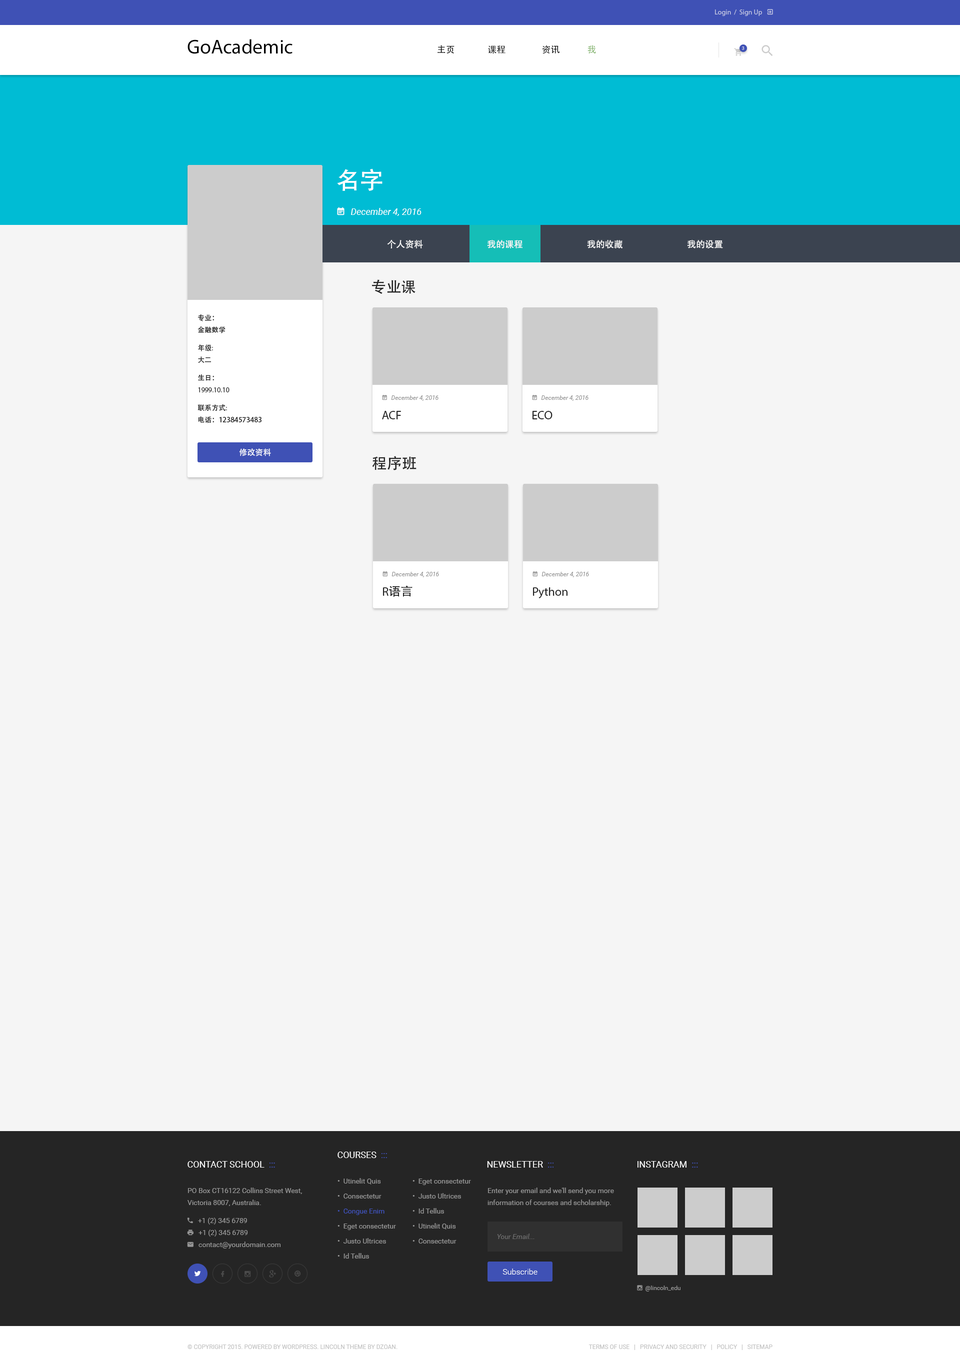
<style>
.page{position:relative;width:960px;height:1366px;background:#f5f5f5}
.page>*{position:absolute;margin:0}
.t1{font:20px "MyriadPro-Regular";color:#000000}
.t2{font:9px "AdobeHeitiStd-Regular";color:#000000}
.t3{font:9px "AdobeHeitiStd-Regular";color:#87b672}
.t4{font:4.5px "Roboto-Regular";text-transform:uppercase}
.t5{font:24px "AdobeHeitiStd-Regular";color:#ffffff}
.t6{font:9px "AdobeHeitiStd-Regular";color:#f5f5f5}
.t7{font:15px "AdobeHeitiStd-Regular";color:#252525}
.t8{font:7px/12px "AdobeHeitiStd-Regular";color:#252525}
.t9{font:7px/18px "AdobeHeitiStd-Regular";color:#252525}
.t10{font:7px/18px "MyriadPro-Regular";color:#252525}
.t11{font:7px/12px "MyriadPro-Regular";color:#252525}
.t12{font:12px "MyriadPro-Regular";color:#252525}
.t13{font:8px "AdobeHeitiStd-Regular";color:#ffffff}
.t14{font:12px "AdobeHeitiStd-Regular";color:#252525}
.t15{font:9px "Roboto-Regular";color:#ffffff;text-transform:uppercase}
.t16{font:9px "Roboto-Regular";color:#3f51b5;text-transform:uppercase}
.t17{font:7px/15px "Roboto-Regular";color:#959595}
.t18{font:7px/15px "Roboto-Regular";color:#3f51b5}
.t19{font:7px/12px "Roboto-Regular";color:#959595}
.t20{font:7px "Roboto-Italic";color:#6c6c6c}
.t21{font:8px "Roboto-Light";color:#ffffff}
.t22{font:6px "Roboto-Regular";color:#c2c2c2;text-transform:uppercase}
</style>
<div class="page">
<p class="t1" style="left:188px;top:39px;width:104px;height:15px">GoAcademic</p>
<p class="t2" style="left:438px;top:45px;width:16px;height:9px">主页</p>
<p class="t2" style="left:488px;top:46px;width:18px;height:8px">课程</p>
<p class="t2" style="left:542px;top:45px;width:18px;height:9px">资讯</p>
<p class="t3" style="left:588px;top:45px;width:8px;height:9px">我</p>
<p class="t4" style="left:742px;top:46px;width:2px;height:4px">3</p>
<p class="t5" style="left:337px;top:168px;width:45px;height:23px">名字</p>
<p class="t6" style="left:387px;top:240px;width:36px;height:8px">个人资料</p>
<p class="t6" style="left:487px;top:240px;width:35px;height:8px">我的课程</p>
<p class="t6" style="left:587px;top:240px;width:35px;height:8px">我的收藏</p>
<p class="t6" style="left:687px;top:240px;width:36px;height:8px">我的设置</p>
<p class="t7" style="left:372px;top:280px;width:44px;height:14px">专业课</p>
<p class="t8" style="left:198px;top:314px;width:64px;height:110px">专业：<br>金融数学<br><span class="t9">年级</span><span class="t10">:<br></span>大二<br><span class="t9">生日：<br></span><span class="t11">1999.10.10<br></span><span class="t9">联系方式</span><span class="t10">:<br></span>电话：12384573483</p>
<p class="t12" style="left:382px;top:411px;width:19px;height:9px">ACF</p>
<p class="t12" style="left:532px;top:411px;width:20px;height:9px">ECO</p>
<p class="t13" style="left:239px;top:448px;width:32px;height:8px">修改资料</p>
<p class="t7" style="left:372px;top:456px;width:44px;height:14px">程序班</p>
<p class="t14" style="left:383px;top:586px;width:29px;height:11px"><span class="t12">R</span>语言</p>
<p class="t12" style="left:533px;top:588px;width:35px;height:10px">Python</p>
<p class="t15" style="left:338px;top:1152px;width:49px;height:6px">Courses  <span class="t16">:::</span></p>
<p class="t15" style="left:188px;top:1162px;width:87px;height:6px">Contact School  <span class="t16">:::</span></p>
<p class="t15" style="left:487px;top:1162px;width:67px;height:6px">Newsletter  <span class="t16">:::</span></p>
<p class="t15" style="left:638px;top:1162px;width:60px;height:6px">Instagram  <span class="t16">:::</span></p>
<p class="t17" style="left:338px;top:1178px;width:58px;height:81px">•  Utinelit Quis<br>•  Consectetur<br><span class="t18">•  Congue Enim<br></span>•  Eget consectetur<br>•  Justo Ultrices<br>•  Id Tellus</p>
<p class="t17" style="left:412px;top:1179px;width:59px;height:65px">•  Eget consectetur<br>•  Justo Ultrices<br>•  Id Tellus<br>•  Utinelit Quis<br>•  Consectetur</p>
<p class="t19" style="left:488px;top:1188px;width:126px;height:19px">Enter your email and we'll send you more information of courses and scholarship.</p>
<p class="t20" style="left:497px;top:1234px;width:37px;height:6px">Your Email...</p>
<p class="t21" style="left:502px;top:1269px;width:36px;height:6px">Subscribe</p>
<p class="t22" style="left:188px;top:1345px;width:210px;height:5px">© Copyright 2015. Powered by WordPress. Lincoln Theme by DZOAN.</p>
<p class="t22" style="left:588px;top:1345px;width:184px;height:5px">Terms of Use   |   Privacy and Security   |   Policy   |   Sitemap</p>
</div>
